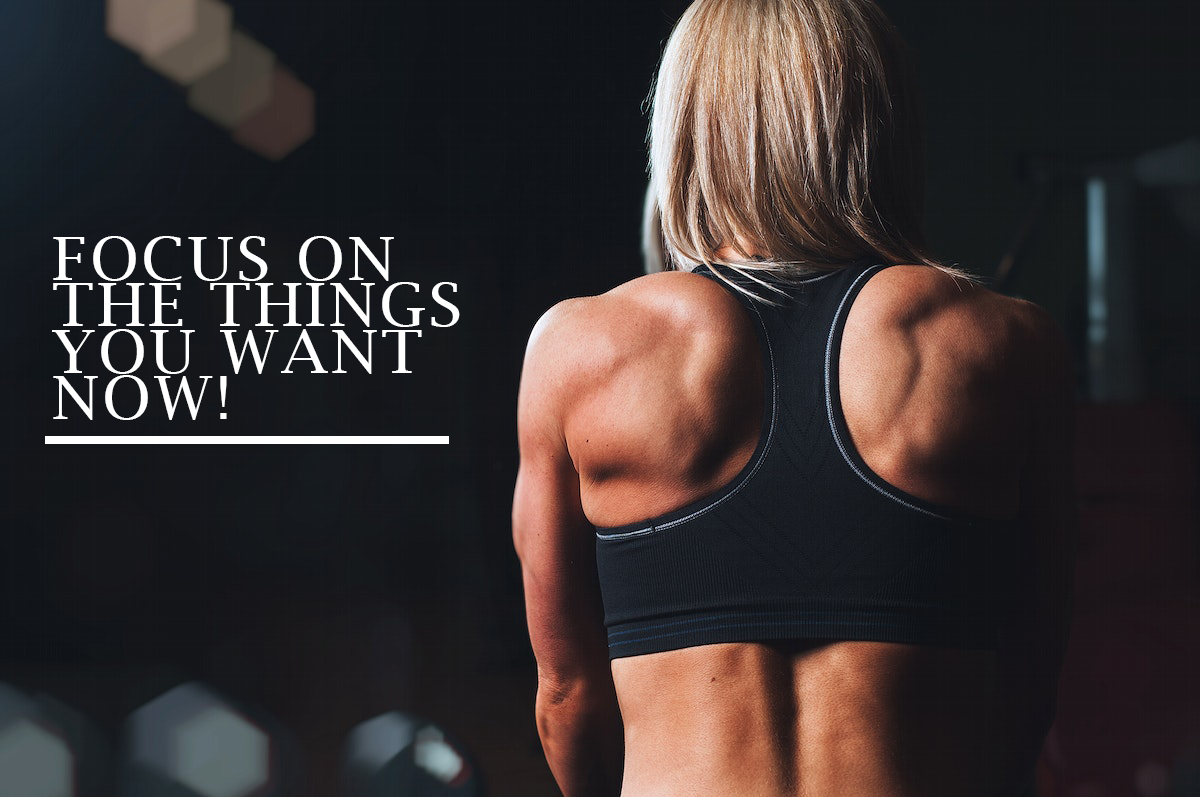
<style>
.page{position:relative;width:1200px;height:797px}
.page>*{position:absolute;margin:0}
.t1{font:58.7px/46.3px "LucidaBright";letter-spacing:0.05em;color:#ffffff;text-transform:uppercase;scale:1.07 1}
</style>
<div class="page">
<p class="t1" style="left:52px;top:236px;width:408px;height:184px">Focus On<br>the things <br>you want <br>NOW!</p>
</div>
